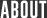
<style>
.page{position:relative;width:47px;height:18px;background:#333333}
.page>*{position:absolute;margin:0}
.t1{font:18px "Gobold";letter-spacing:0.025em;color:#ffffff}
</style>
<div class="page">
<p class="t1" style="left:0px;top:0px;width:47px;height:18px">ABOUT</p>
</div>
